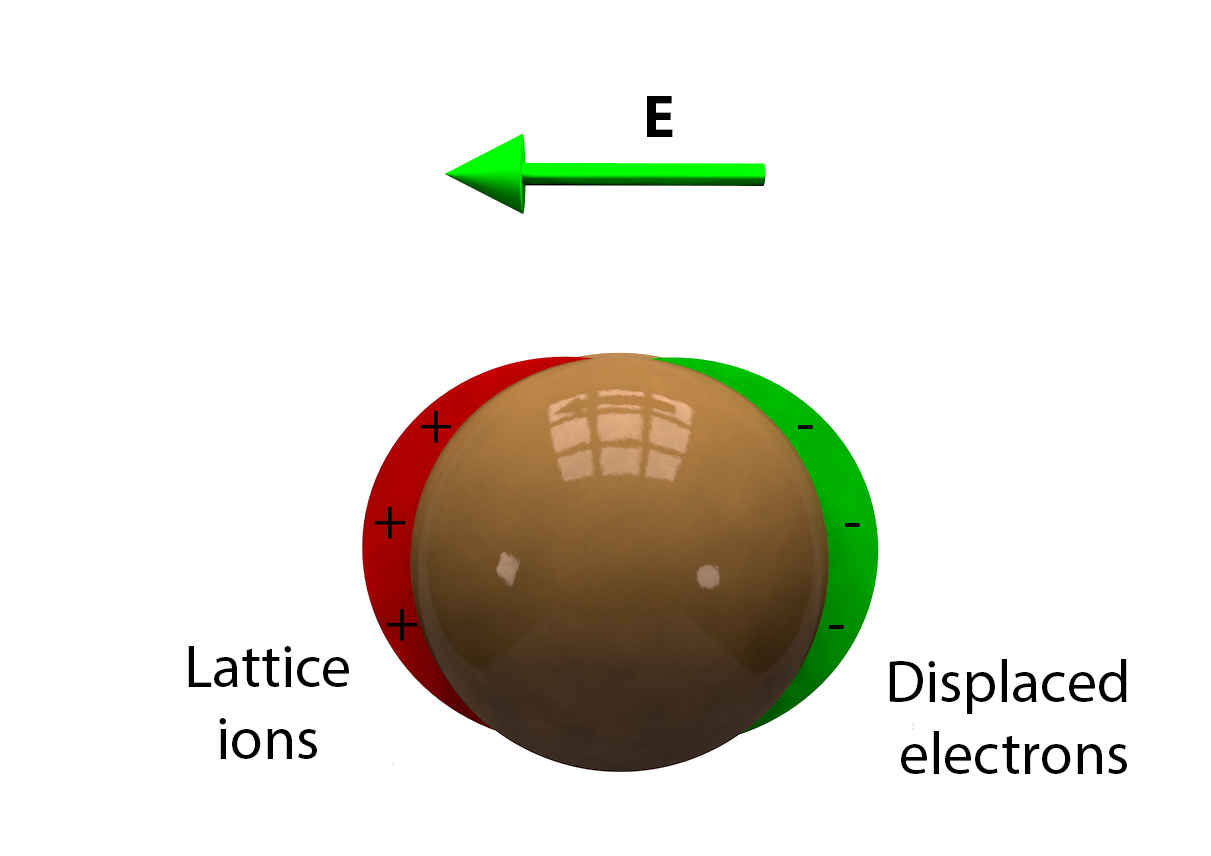
<style>
.page{position:relative;width:1211px;height:856px;background:#ffffff}
.page>*{position:absolute;margin:0}
.t1{font:60px "MyriadPro-Bold";color:#000000}
.t2{font:60px "MyriadPro-Regular";color:#000000}
</style>
<div class="page">
<p class="t1" style="left:647px;top:96px;width:26px;height:41px">E</p>
<p class="t2" style="left:420px;top:411px;width:32px;height:32px">+</p>
<p class="t2" style="left:798px;top:425px;width:15px;height:4px">-</p>
<p class="t2" style="left:374px;top:507px;width:32px;height:32px">+</p>
<p class="t2" style="left:845px;top:523px;width:15px;height:4px">-</p>
<p class="t2" style="left:386px;top:609px;width:32px;height:32px">+</p>
<p class="t2" style="left:829px;top:625px;width:15px;height:4px">-</p>
<p class="t2" style="left:188px;top:646px;width:161px;height:113px;text-align:center">Lattice<br>ions</p>
<p class="t2" style="left:889px;top:659px;width:238px;height:115px;text-align:center">Displaced <br>electrons</p>
</div>
